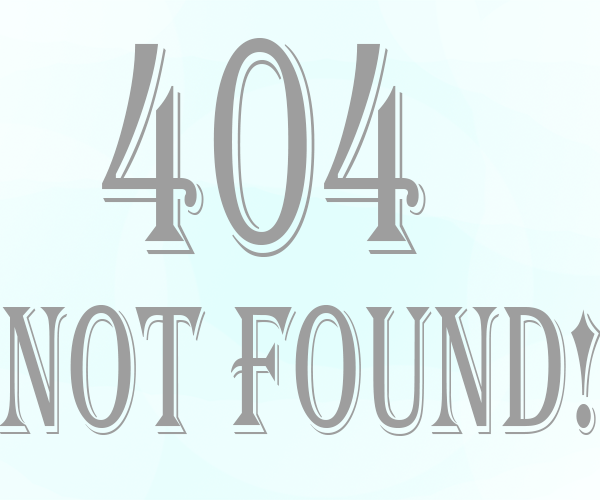
<style>
.page{position:relative;width:600px;height:500px}
.page>*{position:absolute;margin:0}
.t1{font:318.8px "Algerian";color:#9e9e9e;scale:0.59 1}
.t2{font:191.3px "Algerian";color:#9e9e9e;scale:0.59 1}
</style>
<div class="page">
<p class="t1" style="left:102px;top:37px;width:324px;height:220px">404</p>
<p class="t2" style="left:0px;top:304px;width:602px;height:132px">Not Found!</p>
</div>
